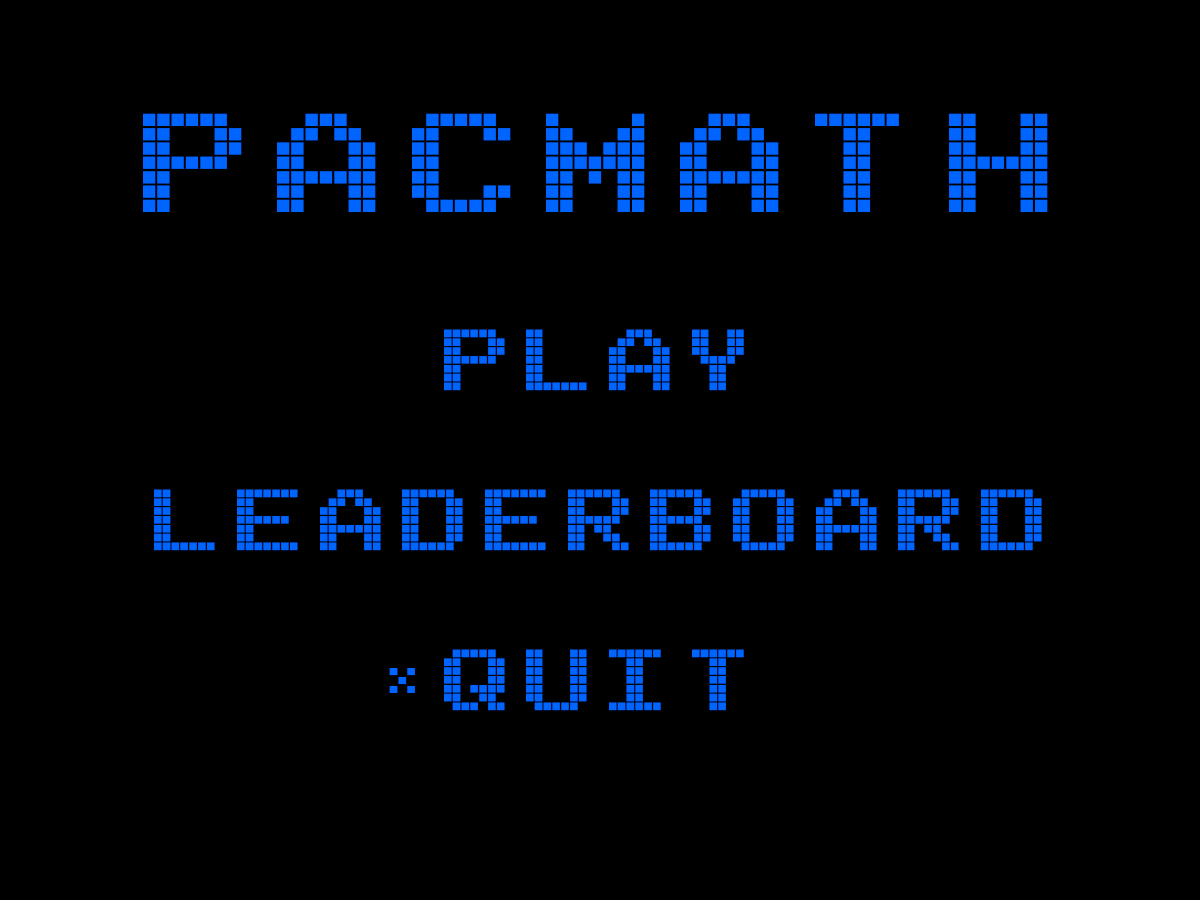
<style>
.page{position:relative;width:1200px;height:900px;background:#000000}
.page>*{position:absolute;margin:0}
.t1{font:133.3px "Arcade";letter-spacing:0.1em;color:#0064ff}
.t2{font:216.7px "Arcade";letter-spacing:0.1em;color:#0064ff}
</style>
<div class="page">
<p class="t1" style="left:143px;top:113px;width:905px;height:598px;text-align:center"><span class="t2">PACMATH<br></span>PLAY<br>LEADERBOARD<br>QUIT</p>
<p class="t1" style="left:389px;top:668px;width:26px;height:25px">*</p>
</div>
